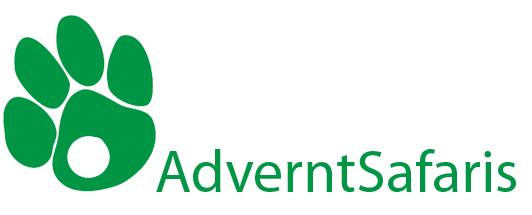
<style>
.page{position:relative;width:532px;height:215px;background:#ffffff}
.page>*{position:absolute;margin:0}
.t1{font:60px "MyriadPro-Regular";color:#019544}
</style>
<div class="page">
<p class="t1" style="left:156px;top:149px;width:360px;height:43px">AdverntSafaris</p>
</div>
